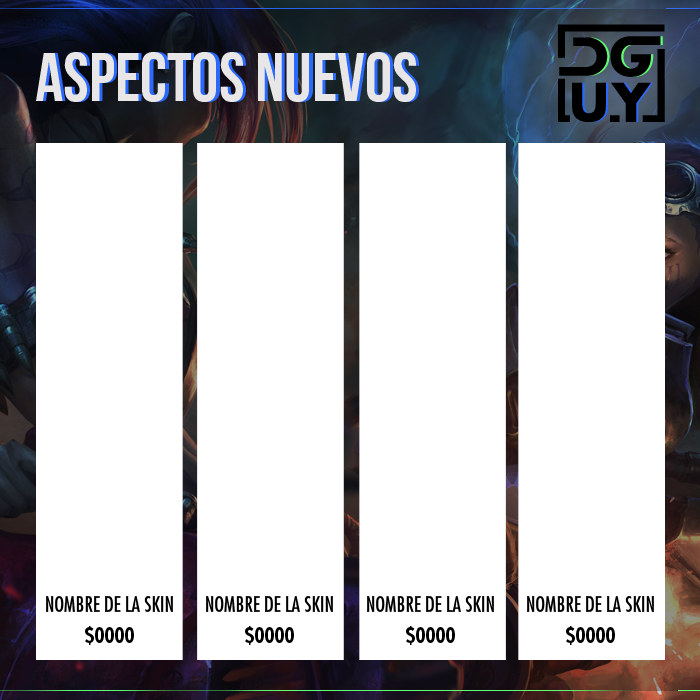
<style>
.page{position:relative;width:700px;height:700px;background:#ffffff}
.page>*{position:absolute;margin:0}
.t1{font:20.4px "FuturaStd-Condensed";color:#000000;text-transform:uppercase}
.t2{font:20.4px "FuturaStd-CondensedBold";color:#000000;text-transform:uppercase}
</style>
<div class="page">
<p class="t1" style="left:46px;top:596px;width:127px;height:16px">NOMBRE DE LA SKIN</p>
<p class="t1" style="left:206px;top:596px;width:127px;height:16px">NOMBRE DE LA SKIN</p>
<p class="t1" style="left:367px;top:596px;width:127px;height:16px">NOMBRE DE LA SKIN</p>
<p class="t1" style="left:527px;top:596px;width:127px;height:16px">NOMBRE DE LA SKIN</p>
<p class="t2" style="left:85px;top:626px;width:49px;height:19px">$0000</p>
<p class="t2" style="left:245px;top:626px;width:49px;height:19px">$0000</p>
<p class="t2" style="left:406px;top:626px;width:49px;height:19px">$0000</p>
<p class="t2" style="left:566px;top:626px;width:49px;height:19px">$0000</p>
</div>
